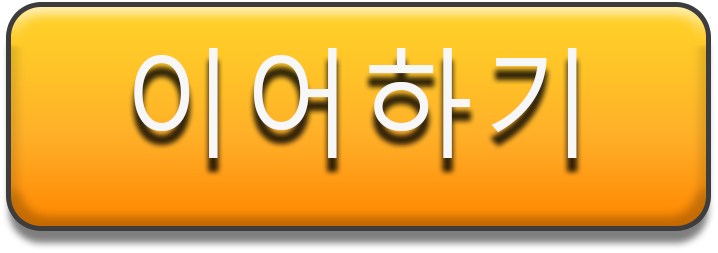
<style>
.page{position:relative;width:718px;height:253px}
.page>*{position:absolute;margin:0}
.t1{font:117.4px "MalgunGothic";letter-spacing:0.05em;color:#f7f7f7}
</style>
<div class="page">
<p class="t1" style="left:134px;top:48px;width:443px;height:110px">이어하기</p>
</div>
